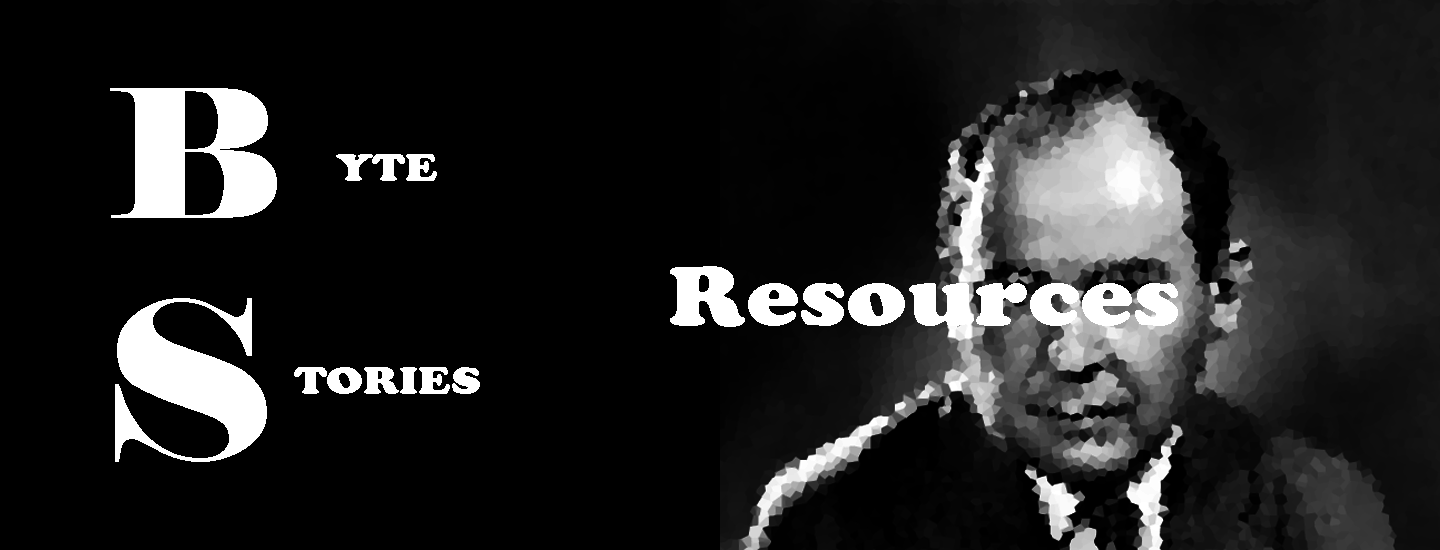
<style>
.page{position:relative;width:1440px;height:550px;background:#000000}
.page>*{position:absolute;margin:0}
.t1{font:177.5px "Elephant-Regular";color:#ffffff;scale:1.15 1}
.t2{font:40.8px "CooperBlack";color:#ffffff;scale:1.15 1}
.t3{font:87px "CooperBlack";color:#ffffff;scale:1.15 1}
.t4{font:218.8px "Elephant-Regular";color:#ffffff;scale:1.15 1}
</style>
<div class="page">
<p class="t1" style="left:110px;top:88px;width:167px;height:130px">B</p>
<p class="t2" style="left:336px;top:154px;width:101px;height:27px">YTE</p>
<p class="t3" style="left:670px;top:266px;width:508px;height:61px">Resources</p>
<p class="t4" style="left:115px;top:298px;width:152px;height:164px">S</p>
<p class="t2" style="left:294px;top:367px;width:186px;height:27px">TORIES</p>
</div>
